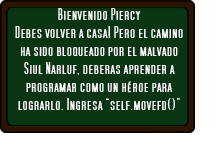
<style>
.page{position:relative;width:224px;height:160px;background:#093513}
.page>*{position:absolute;margin:0}
.t1{font:15px "SFMoviePoster";color:#fefefe}
</style>
<div class="page">
<p class="t1" style="left:15px;top:8px;width:168px;height:102px;text-align:center">Bienvenido Piercy<br>Debes volver a casa! Pero el camino ha sido bloqueado por el malvado Siul Narluf, deberas aprender a programar como un héroe para lograrlo. Ingresa “self.movefd()” gra</p>
</div>
